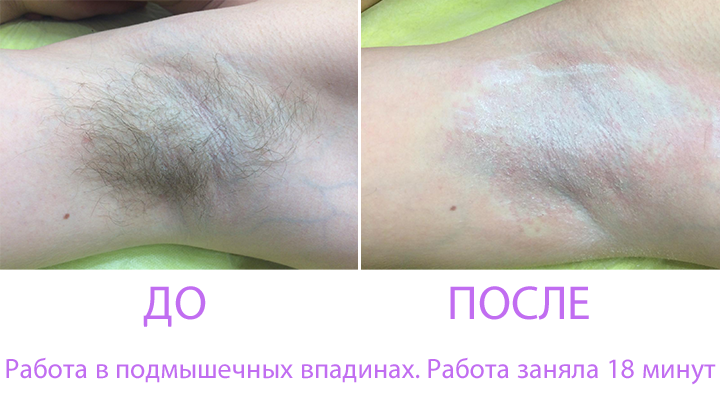
<style>
.page{position:relative;width:720px;height:405px;background:#ffffff}
.page>*{position:absolute;margin:0}
.t1{font:48px "MyriadPro-Regular";color:#c16df1}
.t2{font:28px "MyriadPro-Regular";color:#c16df1}
</style>
<div class="page">
<p class="t1" style="left:143px;top:286px;width:63px;height:41px">ДО</p>
<p class="t1" style="left:450px;top:286px;width:139px;height:34px">ПОСЛЕ</p>
<p class="t2" style="left:6px;top:357px;width:710px;height:28px">Работа в подмышечных впадинах. Работа заняла 18 минут</p>
</div>
